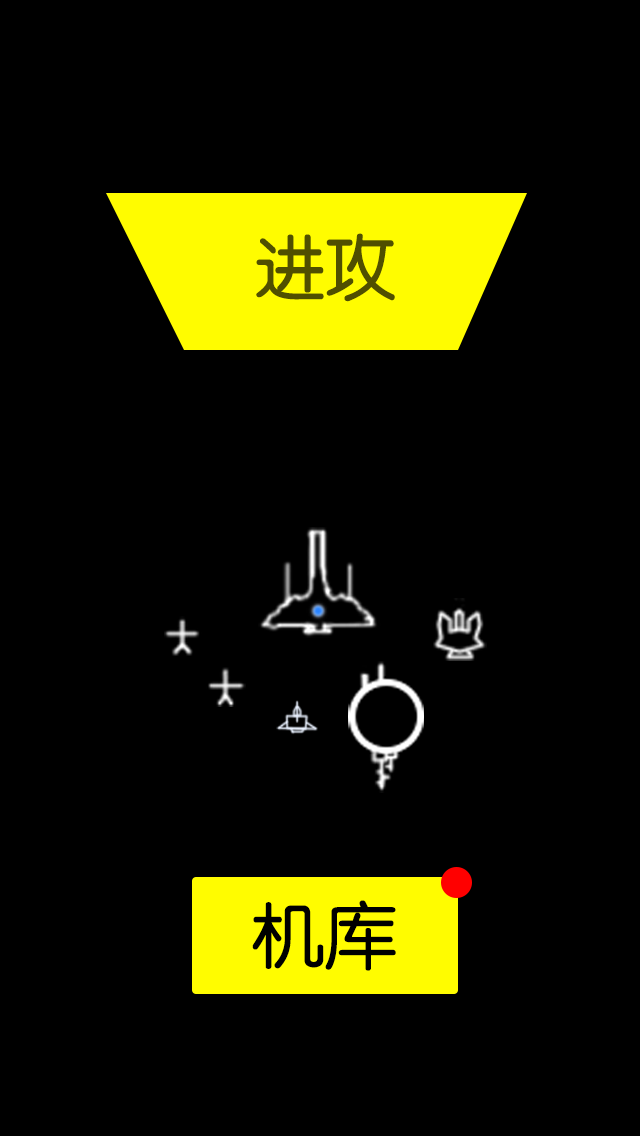
<style>
.page{position:relative;width:640px;height:1136px;background:#000000}
.page>*{position:absolute;margin:0}
.t1{font:72px "JZunYuan";color:#504f00}
.t2{font:72px "JZunYuan";color:#000000}
</style>
<div class="page">
<p class="t1" style="left:256px;top:233px;width:139px;height:69px">进攻</p>
<p class="t2" style="left:252px;top:900px;width:144px;height:71px">机库</p>
</div>
